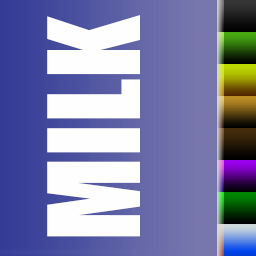
<style>
.page{position:relative;width:256px;height:256px;background:#fefefe}
.page>*{position:absolute;margin:0}
.t1{font:117.1px "Impact";color:#fefefe}
</style>
<div class="page">
<p class="t1" style="left:47px;top:15px;width:93px;height:222px;rotate:-90deg">MILK</p>
</div>
